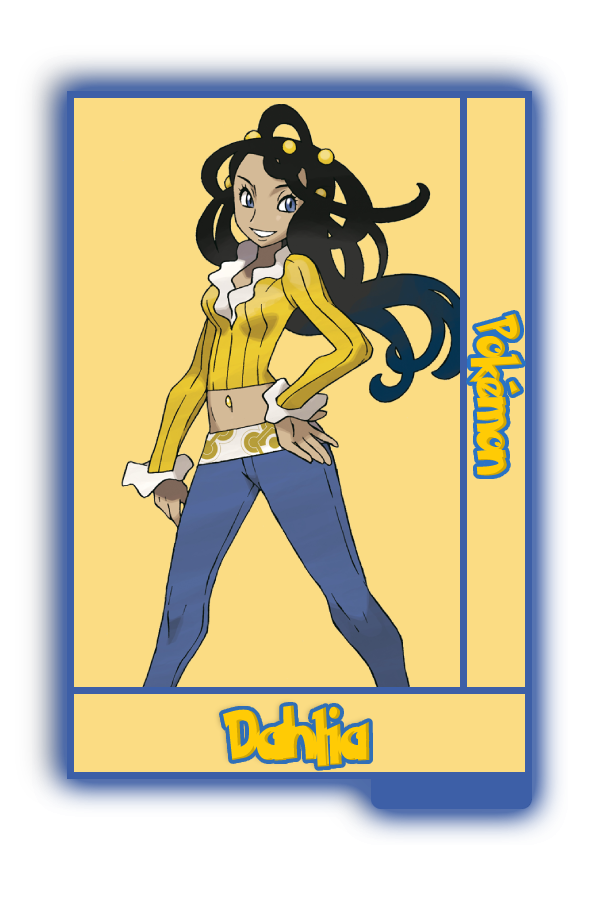
<style>
.page{position:relative;width:600px;height:900px;background:#fbdc83}
.page>*{position:absolute;margin:0}
.t1{font:48.8px "PokemonSolidNormal";color:#ffcb05;scale:0.8 1}
.t2{font:56.6px "PokemonSolidNormal";color:#ffcb05;scale:0.92 1}
</style>
<div class="page">
<p class="t1" style="left:469px;top:313px;width:54px;height:163px;rotate:90deg">Pokémon</p>
<p class="t2" style="left:222px;top:705px;width:148px;height:62px">Dahlia</p>
</div>
